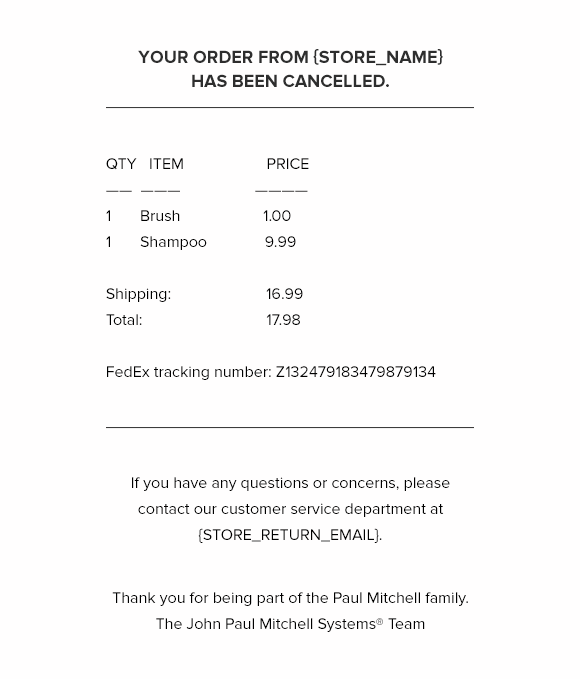
<style>
.page{position:relative;width:580px;height:679px;background:#fffefe}
.page>*{position:absolute;margin:0}
.t1{font:18px/24px "ProximaNova-Bold";color:#2e2e2e;text-transform:uppercase}
.t2{font:16px/26px "ProximaNova-Regular";color:#000000}
</style>
<div class="page">
<p class="t1" style="left:138px;top:49px;width:305px;height:38px;text-align:center">Your order from {STORE_NAME} has been cancelled.</p>
<p class="t2" style="left:106px;top:158px;width:330px;height:222px">QTY   ITEM                    PRICE <br>——  ———                  ———— <br>1       Brush                    1.00<br>1       Shampoo              9.99<br><br>Shipping:                       16.99<br>Total:                              17.98<br><br>FedEx tracking number: Z132479183479879134</p>
<p class="t2" style="left:132px;top:477px;width:318px;height:66px;text-align:center">If you have any questions or concerns, please contact our customer service department at {STORE_RETURN_EMAIL}.</p>
<p class="t2" style="left:112px;top:592px;width:356px;height:40px;text-align:center">Thank you for being part of the Paul Mitchell family. <br>The John Paul Mitchell Systems® Team</p>
</div>
